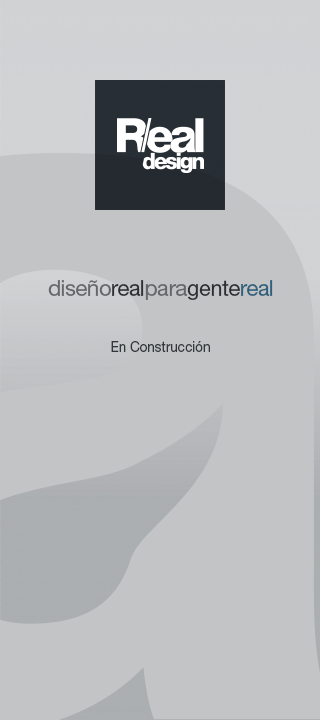
<style>
.page{position:relative;width:320px;height:720px;background:#c3c4c6}
.page>*{position:absolute;margin:0}
.t1{font:22px "HelveticaNeueLTStd-Roman";letter-spacing:-0.02em;color:#636769}
.t2{font:22px "HelveticaNeueLTStd-Roman";letter-spacing:-0.02em;color:#292f33}
.t3{font:22px "HelveticaNeueLTStd-Roman";letter-spacing:-0.02em;color:#2c607c}
.t4{font:15px "HelveticaNeueLTStd-Roman";color:#30373e;scale:0.9 1}
</style>
<div class="page">
<p class="t1" style="left:48px;top:280px;width:225px;height:20px">diseño<span class="t2">real</span>para<span class="t2">gente</span><span class="t3">real</span></p>
<p class="t4" style="left:111px;top:341px;width:99px;height:11px">En Construcción</p>
</div>
